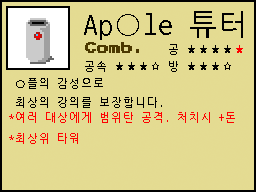
<style>
.page{position:relative;width:256px;height:192px;background:#e4db92}
.page>*{position:absolute;margin:0}
.t1{font:30px "NanumGothicCoding";color:#000000}
.t2{font:12px "PressStart2P";color:#4b3800}
.t3{font:11px "NanumGothicCoding";color:#000000}
.t4{font:11px "NanumGothicCoding";color:#ff0000}
</style>
<div class="page">
<p class="t1" style="left:84px;top:11px;width:159px;height:29px">Ap○le 튜터</p>
<p class="t2" style="left:85px;top:42px;width:54px;height:11px">Comb.</p>
<p class="t3" style="left:169px;top:44px;width:74px;height:11px">공 ★★★★<span class="t4">★</span></p>
<p class="t3" style="left:85px;top:61px;width:146px;height:11px">공속 ★★★☆ 방 ★★★☆</p>
<p class="t3" style="left:16px;top:78px;width:146px;height:30px">○플의 감성으로<br>최상의 강의를 보장합니다.</p>
<p class="t4" style="left:9px;top:112px;width:226px;height:11px">*여러 대상에게 범위탄 공격. 처치시 +돈</p>
<p class="t4" style="left:9px;top:133px;width:69px;height:11px">*최상위 타워</p>
</div>
